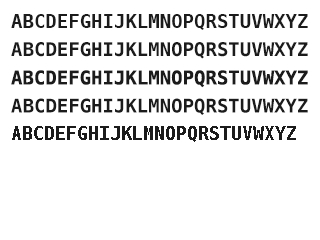
<style>
.page{position:relative;width:320px;height:240px;background:#ffffff}
.page>*{position:absolute;margin:0}
.t1{font:19px "DejaVuSansMono-Bold";color:#1c1b1b}
</style>
<div class="page">
<p class="t1" style="left:11px;top:14px;width:297px;height:16px">ABCDEFGHIJKLMNOPQRSTUVWXYZ</p>
<p class="t1" style="left:11px;top:42px;width:297px;height:17px">ABCDEFGHIJKLMNOPQRSTUVWXYZ</p>
<p class="t1" style="left:11px;top:70px;width:297px;height:18px">ABCDEFGHIJKLMNOPQRSTUVWXYZ</p>
<p class="t1" style="left:11px;top:98px;width:297px;height:17px">ABCDEFGHIJKLMNOPQRSTUVWXYZ</p>
<p class="t1" style="left:12px;top:126px;width:284px;height:16px">ABCDEFGHIJKLMNOPQRSTUVWXYZ</p>
</div>
